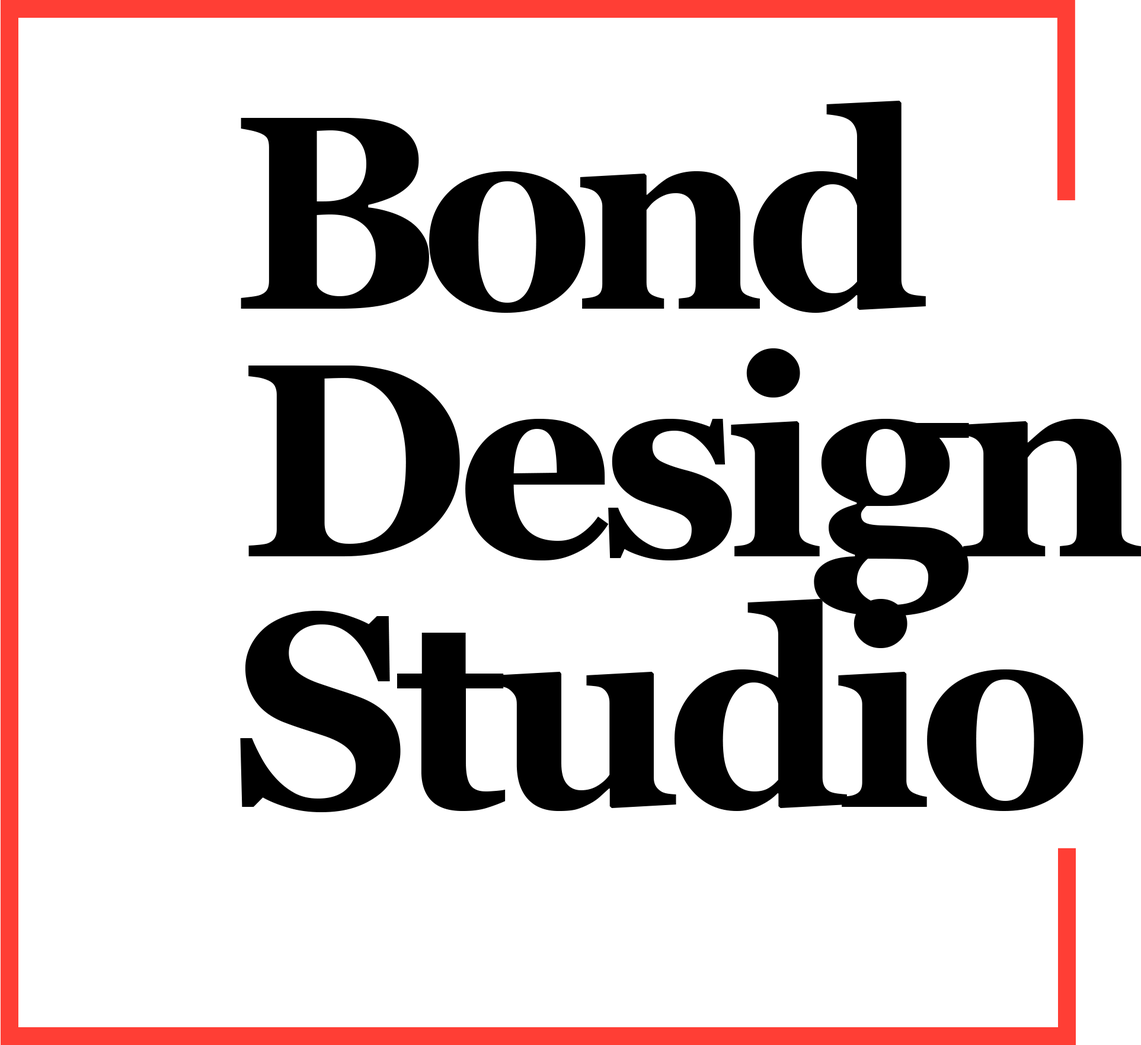
<style>
.page{position:relative;width:1141px;height:1045px;background:#ffffff}
.page>*{position:absolute;margin:0}
.t1{font:275.4px "Georgia-Bold";letter-spacing:-0.075em;color:#000000}
.t2{font:275.4px "Georgia-Bold";letter-spacing:-0.05em;color:#000000}
</style>
<div class="page">
<p class="t1" style="left:241px;top:101px;width:685px;height:212px">Bond</p>
<p class="t2" style="left:248px;top:348px;width:893px;height:268px">Design</p>
<p class="t2" style="left:240px;top:599px;width:843px;height:213px">Studio</p>
</div>
